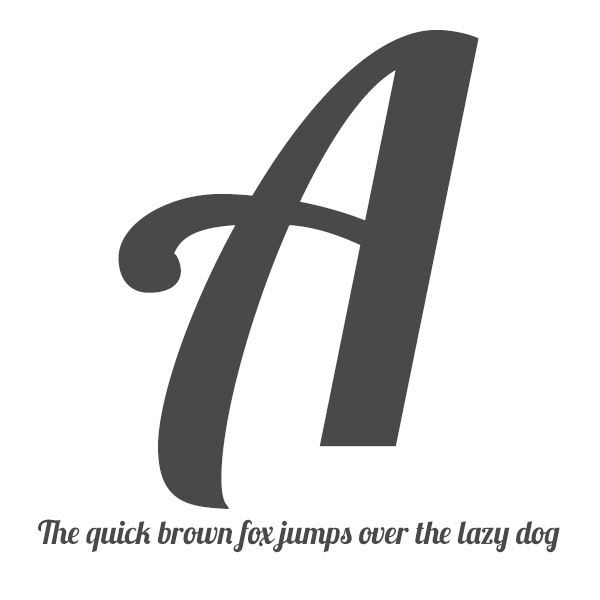
<style>
.page{position:relative;width:600px;height:600px;background:#ffffff}
.page>*{position:absolute;margin:0}
.t1{font:554.3px "Lobster1.3";color:#494949;scale:0.95 1}
.t2{font:32.6px "Lobster1.3";color:#494949;scale:0.95 1}
</style>
<div class="page">
<p class="t1" style="left:118px;top:30px;width:361px;height:479px">A</p>
<p class="t2" style="left:38px;top:519px;width:522px;height:34px">The quick brown fox jumps over the lazy dog</p>
</div>
